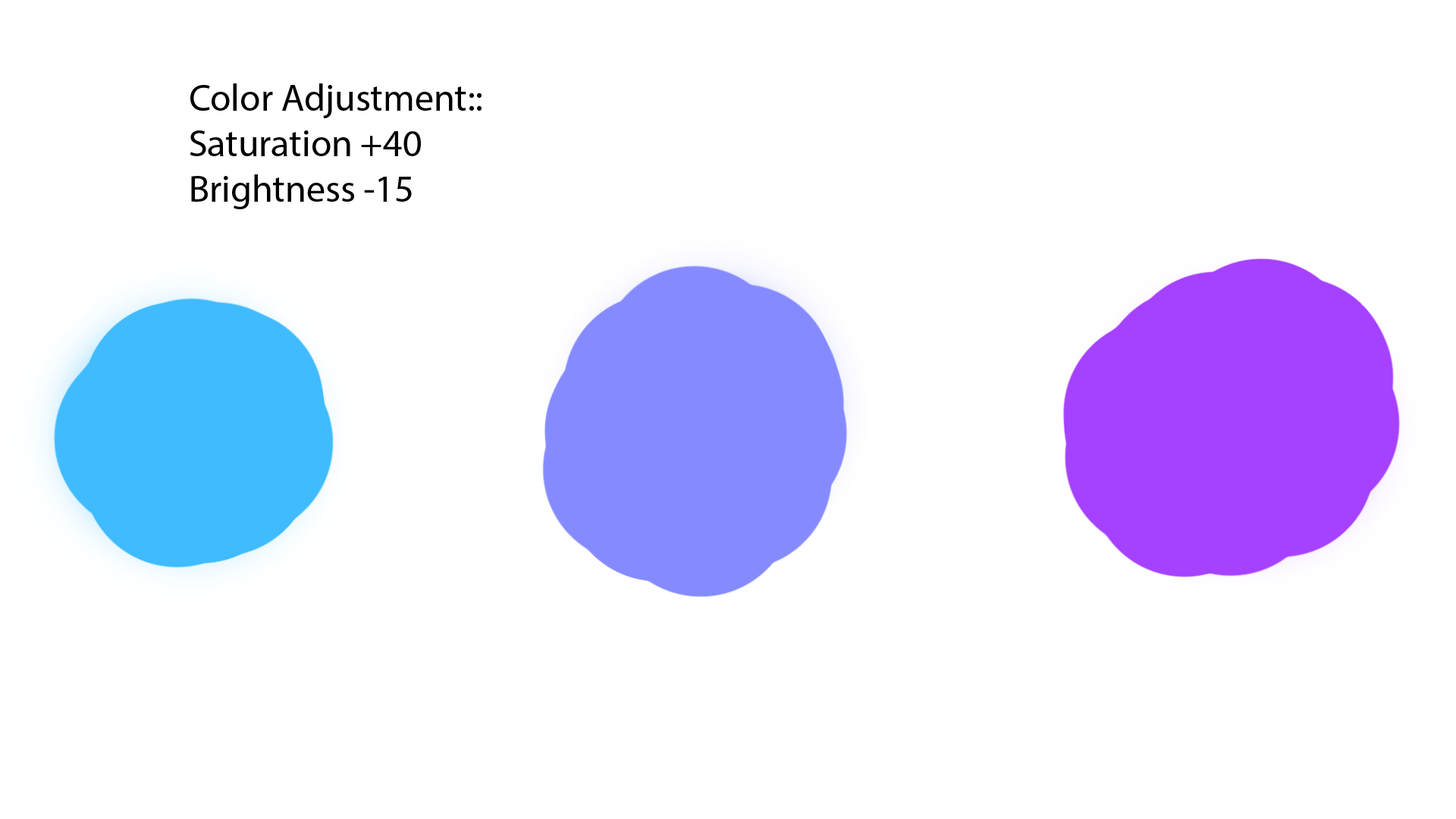
<style>
.page{position:relative;width:1456px;height:819px;background:#ffffff}
.page>*{position:absolute;margin:0}
.t1{font:37.9px "MyriadPro-Regular";color:#000000}
</style>
<div class="page">
<p class="t1" style="left:190px;top:83px;width:292px;height:126px">Color Adjustment::<br>Saturation +40<br>Brightness -15</p>
</div>
